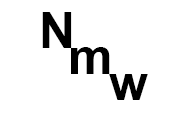
<style>
.page{position:relative;width:180px;height:120px;background:#ffffff}
.page>*{position:absolute;margin:0}
.t1{font:50px "Arial-BoldMT";color:#000000}
</style>
<div class="page">
<p class="t1" style="left:42px;top:12px;width:30px;height:36px">N</p>
<p class="t1" style="left:71px;top:47px;width:39px;height:27px">m</p>
<p class="t1" style="left:109px;top:74px;width:39px;height:26px">w</p>
</div>
